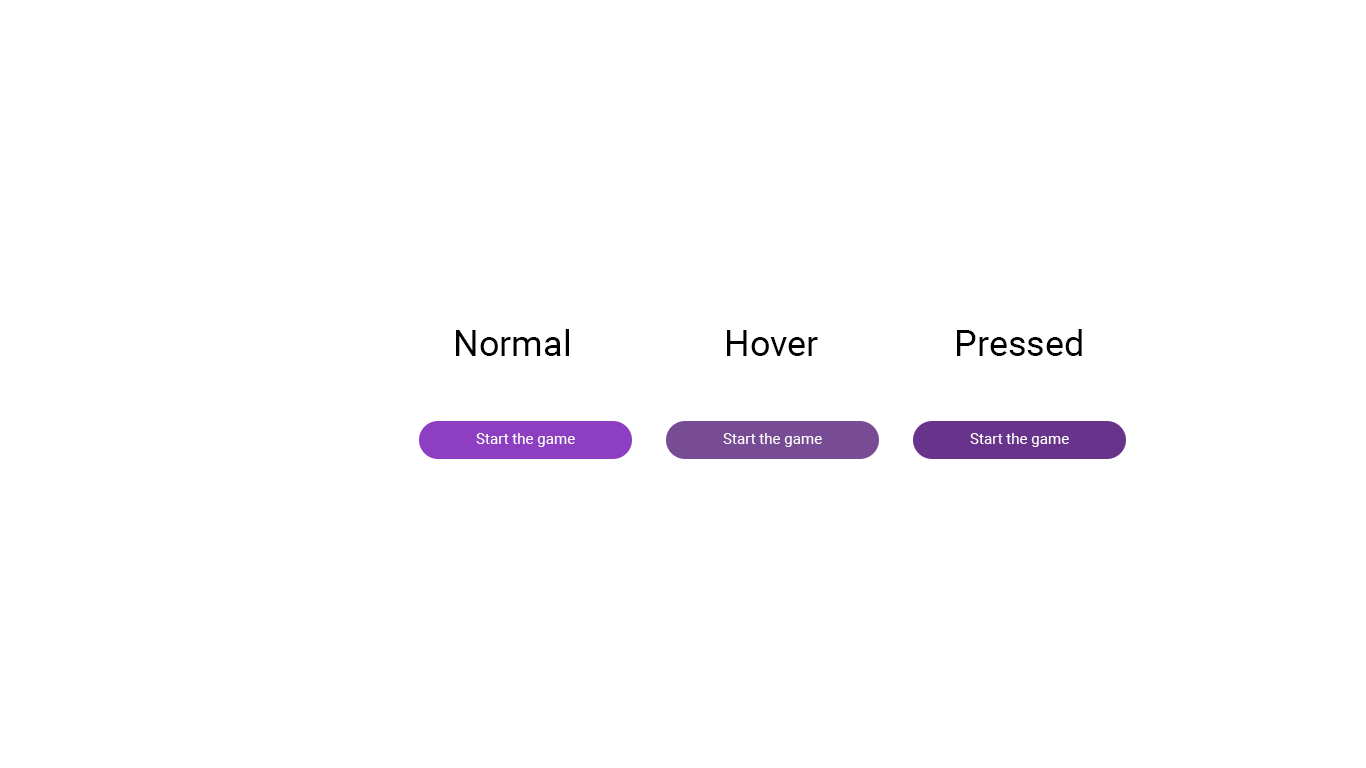
<style>
.page{position:relative;width:1366px;height:768px;background:#ffffff}
.page>*{position:absolute;margin:0}
.t1{font:36px "Roboto-Regular";color:#000000}
.t2{font:15.1px "Roboto-Regular";color:#ffffff}
</style>
<div class="page">
<p class="t1" style="left:456px;top:329px;width:113px;height:27px">Normal</p>
<p class="t1" style="left:957px;top:329px;width:125px;height:27px">Pressed</p>
<p class="t1" style="left:727px;top:330px;width:91px;height:26px">Hover</p>
<p class="t2" style="left:476px;top:433px;width:99px;height:14px">Start the game</p>
<p class="t2" style="left:723px;top:433px;width:99px;height:14px">Start the game</p>
<p class="t2" style="left:970px;top:433px;width:99px;height:14px">Start the game</p>
</div>
